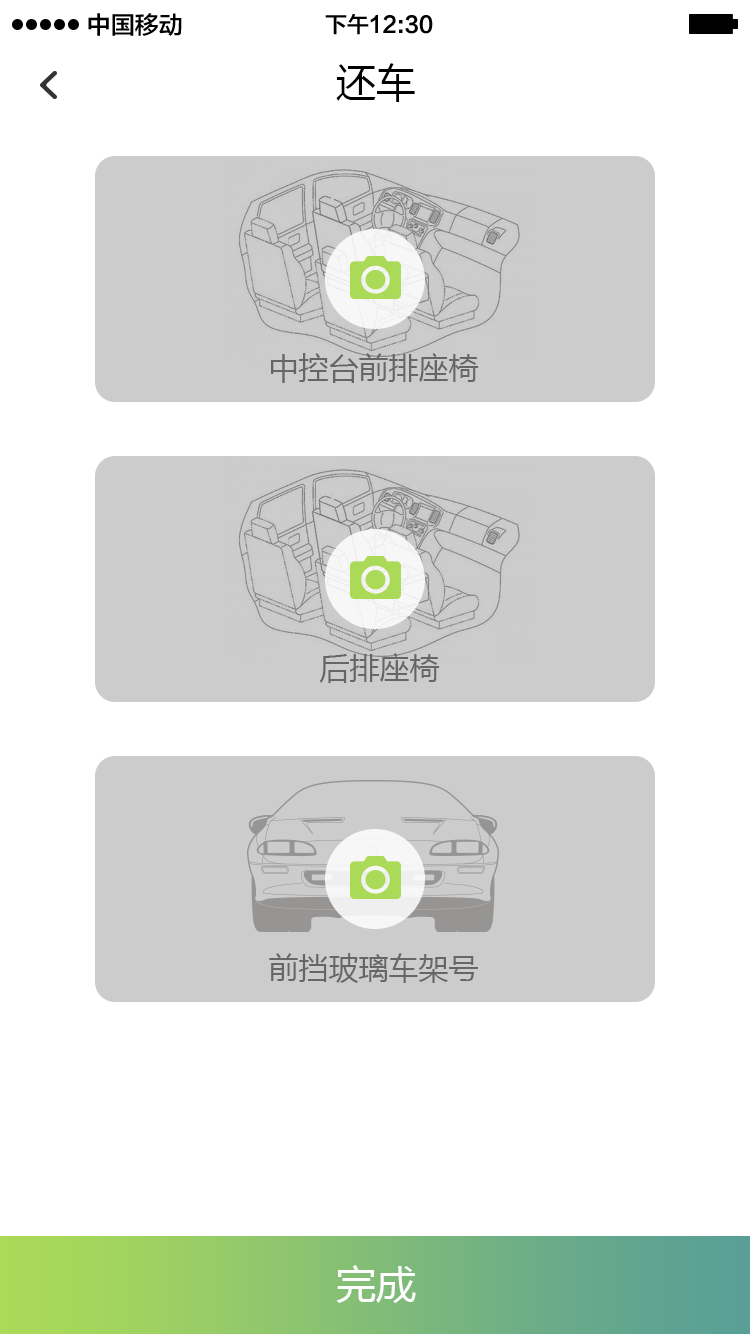
<style>
.page{position:relative;width:750px;height:1334px;background:#ffffff}
.page>*{position:absolute;margin:0}
.t1{font:24px "FZLTZHK--GBK1-0";color:#000000}
.t2{font:22px "FZLTZHK--GBK1-0";color:#000000}
.t3{font:40px "MicrosoftYaHei";color:#000000}
.t4{font:30px "MicrosoftYaHei";color:#666666}
.t5{font:40px "MicrosoftYaHei";color:#ffffff}
</style>
<div class="page">
<p class="t1" style="left:88px;top:13px;width:94px;height:23px">中国移动</p>
<p class="t2" style="left:325px;top:14px;width:108px;height:21px">下午12:30</p>
<p class="t3" style="left:336px;top:63px;width:79px;height:39px">还车</p>
<p class="t4" style="left:271px;top:353px;width:208px;height:30px">中控台前排座椅</p>
<p class="t4" style="left:319px;top:653px;width:121px;height:30px">后排座椅</p>
<p class="t4" style="left:269px;top:953px;width:209px;height:30px">前挡玻璃车架号</p>
<p class="t5" style="left:336px;top:1265px;width:80px;height:38px">完成</p>
</div>
